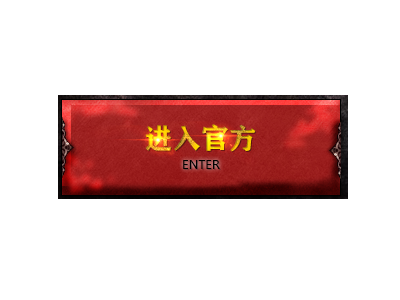
<style>
.page{position:relative;width:400px;height:300px;background:#ffffff}
.page>*{position:absolute;margin:0}
.t1{font:28px "FZCHSJW--GB1-0"}
.t2{font:12px "MicrosoftYaHei";color:#000000}
</style>
<div class="page">
<p class="t1" style="left:145px;top:124px;width:111px;height:28px">进入官方</p>
<p class="t2" style="left:183px;top:160px;width:37px;height:9px">ENTER</p>
</div>
